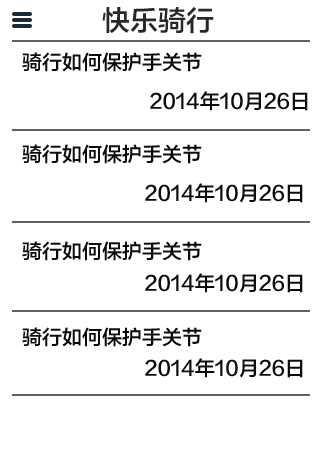
<style>
.page{position:relative;width:320px;height:460px;background:#ffffff}
.page>*{position:absolute;margin:0}
.t1{font:28px "FZLTZHK--GBK1-0";color:#282828}
.t2{font:20px "FZLTZHK--GBK1-0";color:#0b0b0b}
</style>
<div class="page">
<p class="t1" style="left:102px;top:7px;width:112px;height:27px">快乐骑行</p>
<p class="t2" style="left:22px;top:52px;width:180px;height:20px">骑行如何保护手关节</p>
<p class="t2" style="left:150px;top:91px;width:158px;height:20px">2014年10月26日</p>
<p class="t2" style="left:22px;top:144px;width:180px;height:20px">骑行如何保护手关节</p>
<p class="t2" style="left:145px;top:183px;width:158px;height:20px">2014年10月26日</p>
<p class="t2" style="left:22px;top:241px;width:180px;height:20px">骑行如何保护手关节</p>
<p class="t2" style="left:145px;top:273px;width:158px;height:20px">2014年10月26日</p>
<p class="t2" style="left:22px;top:327px;width:180px;height:20px">骑行如何保护手关节</p>
<p class="t2" style="left:145px;top:358px;width:158px;height:20px">2014年10月26日</p>
</div>
